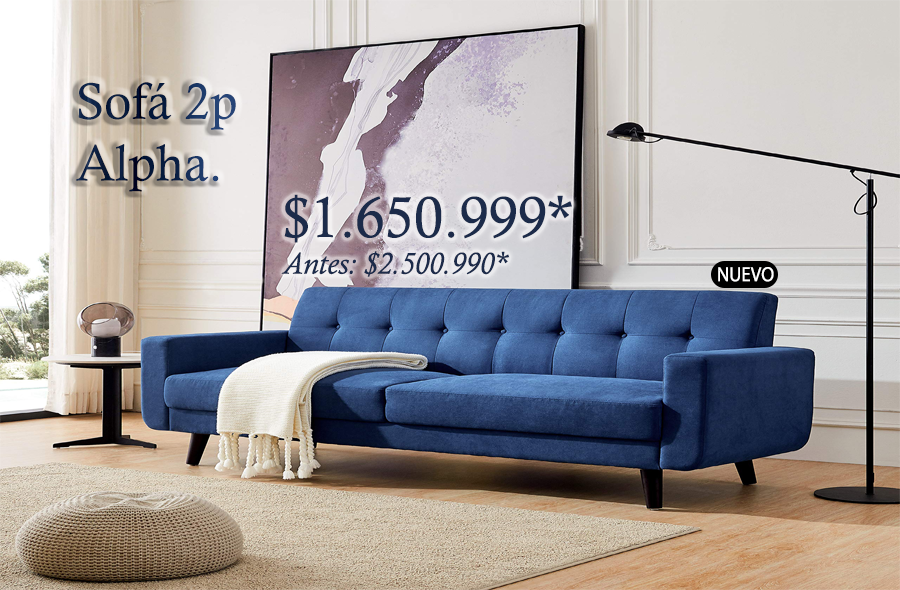
<style>
.page{position:relative;width:900px;height:590px}
.page>*{position:absolute;margin:0}
.t1{font:51.3px "CalistoMT"}
.t2{font:30.7px "CalistoMT-Italic";color:#1c2b4a}
.t3{font:57.5px "CalistoMT";color:#1c2b4a}
.t4{font:20.5px "MyriadPro-Regular";color:#ffffff;scale:0.92 1}
</style>
<div class="page">
<p class="t1" style="left:76px;top:82px;width:160px;height:110px">Sofá 2p<br>Alpha.</p>
<p class="t2" style="left:281px;top:194px;width:291px;height:83px"><span class="t3">$1.650.999*<br></span>Antes: $2.500.990*</p>
<p class="t4" style="left:718px;top:267px;width:56px;height:15px">NUEVO</p>
</div>
